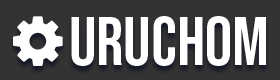
<style>
.page{position:relative;width:280px;height:80px;background:#333333}
.page>*{position:absolute;margin:0}
.t1{font:67.9px "BebasNeue-Regular";color:#ffffff}
</style>
<div class="page">
<p class="t1" style="left:71px;top:16px;width:195px;height:50px">uruchom</p>
</div>
